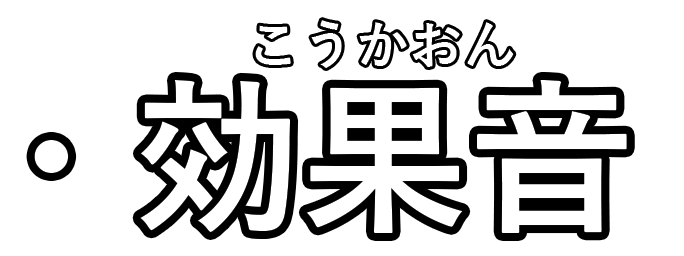
<style>
.page{position:relative;width:684px;height:256px;background:#ffffff}
.page>*{position:absolute;margin:0}
.t1{font:166.7px "YuGothic-Bold";color:#ffffff}
</style>
<div class="page">
<p class="t1" style="left:34px;top:80px;width:593px;height:153px">・効果音</p>
</div>
